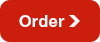
<style>
.page{position:relative;width:100px;height:42px;background:#cb1e0c}
.page>*{position:absolute;margin:0}
.t1{font:16px "HelveticaNeueLTPro-Bd";letter-spacing:0.026em;color:#ffffff}
</style>
<div class="page">
<p class="t1" style="left:19px;top:15px;width:46px;height:12px">Order</p>
</div>
